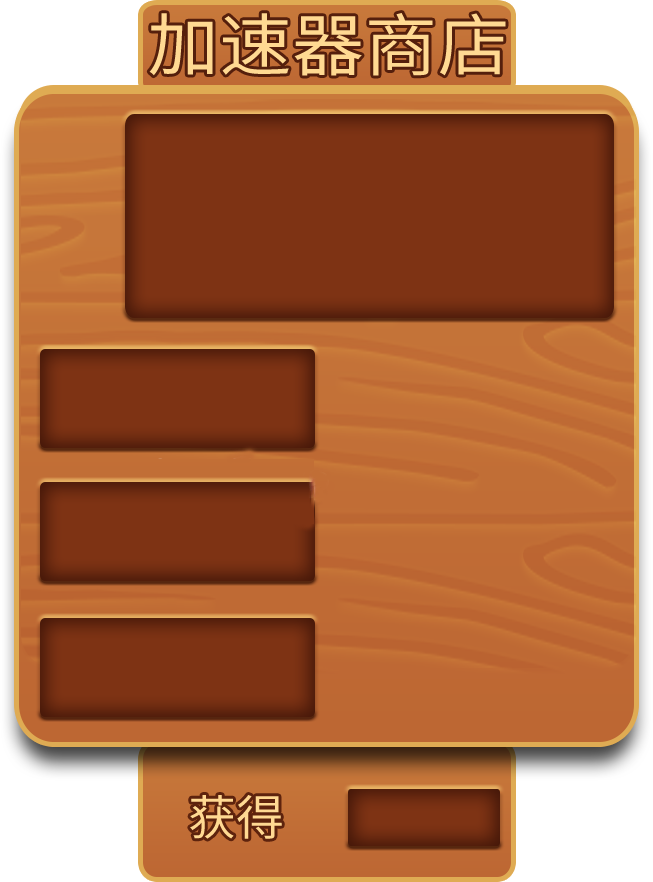
<style>
.page{position:relative;width:653px;height:882px}
.page>*{position:absolute;margin:0}
.t1{font:68.2px "SourceHanSansCN-Regular";color:#ffd992;scale:1.07 1}
.t2{font:48px "SourceHanSansCN-Regular";color:#ffd992}
</style>
<div class="page">
<p class="t1" style="left:149px;top:13px;width:357px;height:63px">加速器商店</p>
<p class="t2" style="left:190px;top:795px;width:92px;height:44px">获得</p>
</div>
